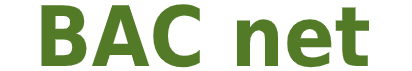
<style>
.page{position:relative;width:412px;height:71px;background:#ffffff}
.page>*{position:absolute;margin:0}
.t1{font:83.3px "DejaVuSansCondensed-Bold";color:#527a27}
</style>
<div class="page">
<p class="t1" style="left:41px;top:4px;width:328px;height:64px">BAC net</p>
</div>
